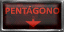
<style>
.page{position:relative;width:64px;height:32px}
.page>*{position:absolute;margin:0}
.t1{font:9.5px "Calibri-Bold";color:#cf4134;text-transform:uppercase;scale:1.08 1}
</style>
<div class="page">
<p class="t1" style="left:5px;top:6px;width:55px;height:8px">pentágono</p>
</div>
